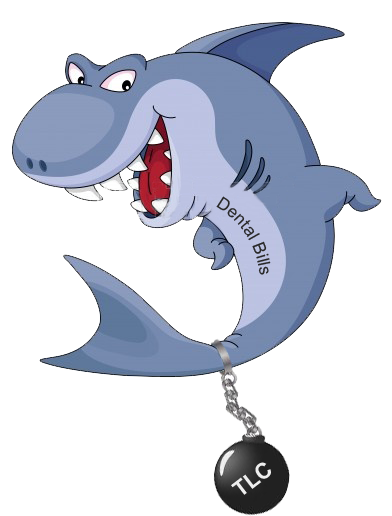
<style>
.page{position:relative;width:392px;height:516px;background:#ffffff}
.page>*{position:absolute;margin:0}
.t1{font:17.1px/21px "ArialMT";color:#282828}
.t2{font:22px "Arial-BoldMT";color:#eeeeee}
</style>
<div class="page">
<p class="t1" style="left:216px;top:196px;width:55px;height:79px;text-align:center">Dental Bills</p>
<p class="t2" style="left:231px;top:462px;width:40px;height:33px;rotate:-38deg">TLC</p>
</div>
